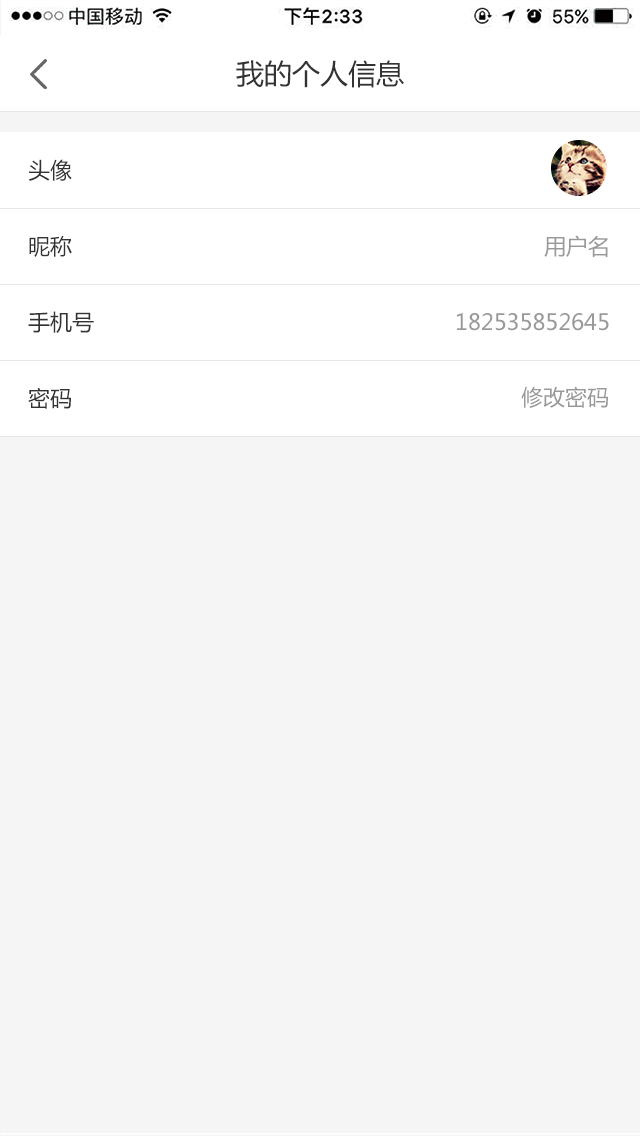
<style>
.page{position:relative;width:640px;height:1136px;background:#f5f5f5}
.page>*{position:absolute;margin:0}
.t1{font:28px "MicrosoftYaHei";color:#333333}
.t2{font:22px "MicrosoftYaHei";color:#333333}
.t3{font:22px "MicrosoftYaHei";color:#999999}
</style>
<div class="page">
<p class="t1" style="left:236px;top:60px;width:168px;height:28px">我的个人信息</p>
<p class="t2" style="left:28px;top:159px;width:44px;height:22px">头像</p>
<p class="t2" style="left:29px;top:235px;width:43px;height:22px">昵称</p>
<p class="t3" style="left:544px;top:235px;width:64px;height:22px">用户名</p>
<p class="t2" style="left:28px;top:311px;width:66px;height:22px">手机号</p>
<p class="t3" style="left:457px;top:313px;width:152px;height:18px">182535852645</p>
<p class="t2" style="left:28px;top:387px;width:43px;height:22px">密码</p>
<p class="t3" style="left:521px;top:386px;width:87px;height:22px">修改密码</p>
</div>
